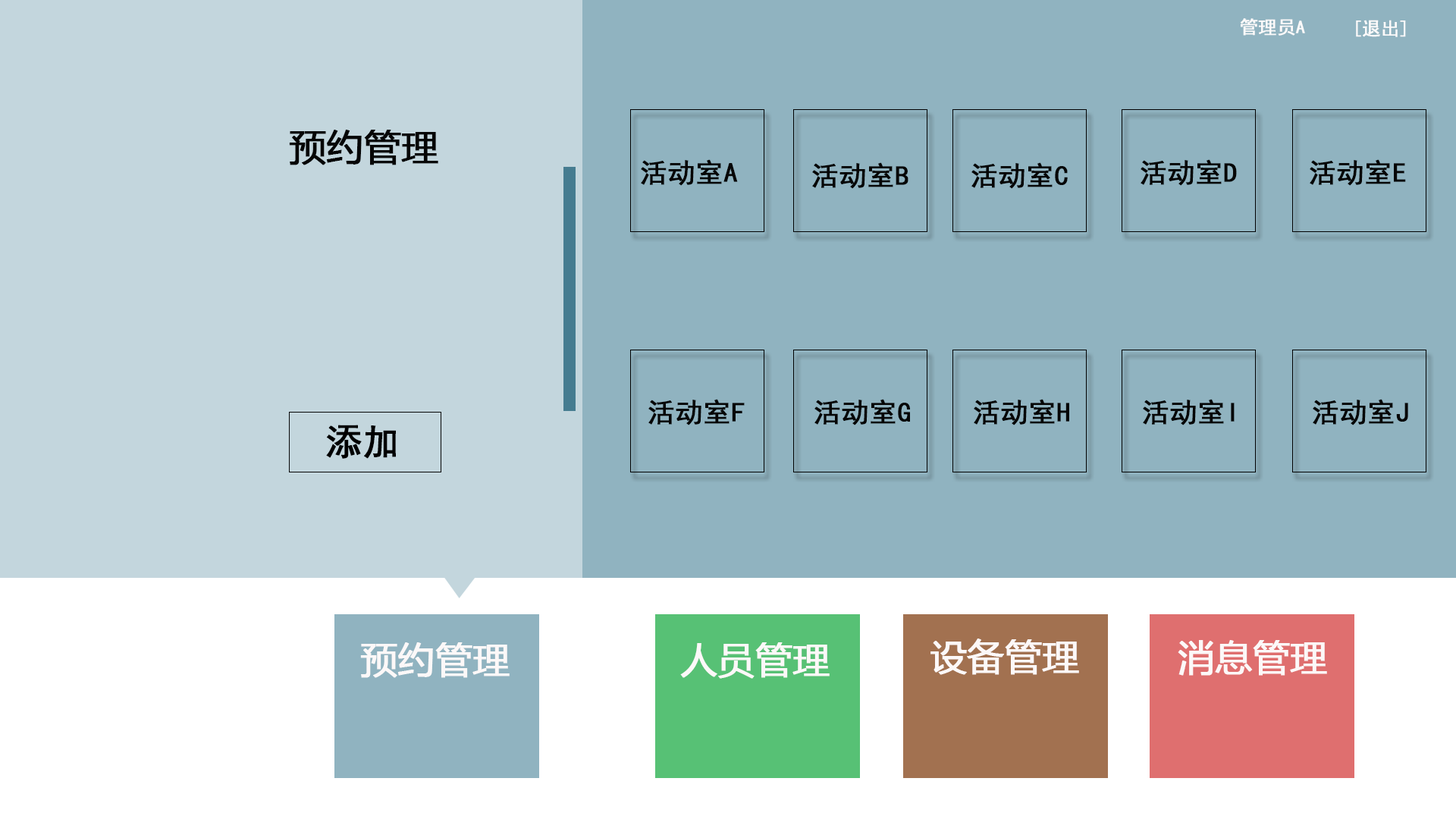
<style>
.page{position:relative;width:1456px;height:819px;background:#90b3c0}
.page>*{position:absolute;margin:0}
.t1{font:18.2px "SimHei";color:#fcfafa;font-weight:bold}
.t2{font:36.4px "MicrosoftYaHei";color:#060606;font-weight:bold}
.t3{font:27.3px "SimHei";color:#060606;font-weight:bold}
.t4{font:36.4px "SimHei";color:#000000;font-weight:bold}
.t5{font:36.4px "MicrosoftYaHei";color:#fcf8f8;font-weight:bold}
</style>
<div class="page">
<p class="t1" style="left:1240px;top:18px;width:65px;height:18px">管理员A</p>
<p class="t1" style="left:1356px;top:20px;width:50px;height:17px">[退出]</p>
<p class="t2" style="left:289px;top:130px;width:149px;height:35px">预约管理</p>
<p class="t3" style="left:641px;top:159px;width:97px;height:27px">活动室A</p>
<p class="t3" style="left:1141px;top:159px;width:96px;height:27px">活动室D</p>
<p class="t3" style="left:1310px;top:159px;width:96px;height:27px">活动室E</p>
<p class="t3" style="left:812px;top:162px;width:96px;height:27px">活动室B</p>
<p class="t3" style="left:971px;top:162px;width:97px;height:27px">活动室C</p>
<p class="t3" style="left:648px;top:399px;width:97px;height:26px">活动室F</p>
<p class="t3" style="left:814px;top:399px;width:96px;height:26px">活动室G</p>
<p class="t3" style="left:974px;top:399px;width:95px;height:26px">活动室H</p>
<p class="t3" style="left:1143px;top:399px;width:92px;height:26px">活动室I</p>
<p class="t3" style="left:1313px;top:399px;width:95px;height:26px">活动室J</p>
<p class="t4" style="left:326px;top:425px;width:70px;height:34px">添加</p>
<p class="t5" style="left:930px;top:639px;width:149px;height:36px">设备管理</p>
<p class="t5" style="left:1178px;top:640px;width:149px;height:36px">消息管理</p>
<p class="t5" style="left:360px;top:642px;width:150px;height:36px">预约管理</p>
<p class="t5" style="left:680px;top:642px;width:150px;height:37px">人员管理</p>
</div>
